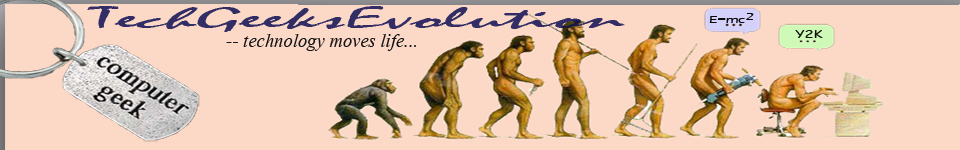
<style>
.page{position:relative;width:960px;height:150px;background:#fbd9c6}
.page>*{position:absolute;margin:0}
.t1{font:30.5px "Mistral";color:#322e65;scale:2.9 1}
.t2{font:10.9px "ErasITC-Medium";color:#0a0a0b;scale:1.33 1}
.t3{font:10.9px "ComicSansMS";color:#10100f;scale:1.33 1}
.t4{font:24px "Kokila-Italic";color:#131316}
</style>
<div class="page">
<p class="t1" style="left:87px;top:6px;width:538px;height:26px">TechGeeksEvolution</p>
<p class="t2" style="left:709px;top:16px;width:36px;height:7px">E=mc</p>
<p class="t2" style="left:746px;top:13px;width:8px;height:7px">2</p>
<p class="t3" style="left:795px;top:30px;width:28px;height:8px">Y2K</p>
<p class="t4" style="left:226px;top:34px;width:190px;height:17px">-- technology moves life...</p>
</div>
